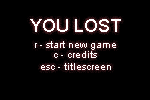
<style>
.page{position:relative;width:150px;height:100px;background:#000000}
.page>*{position:absolute;margin:0}
.t1{font:18px "ArialMT";color:#ffffff}
.t2{font:10px "ArialMT";color:#ffffff}
</style>
<div class="page">
<p class="t1" style="left:30px;top:19px;width:91px;height:13px">YOU LOST</p>
<p class="t2" style="left:35px;top:41px;width:81px;height:9px">r - start new game</p>
<p class="t2" style="left:54px;top:51px;width:43px;height:7px">c - credits</p>
<p class="t2" style="left:41px;top:63px;width:70px;height:7px">esc - titlescreen</p>
</div>
